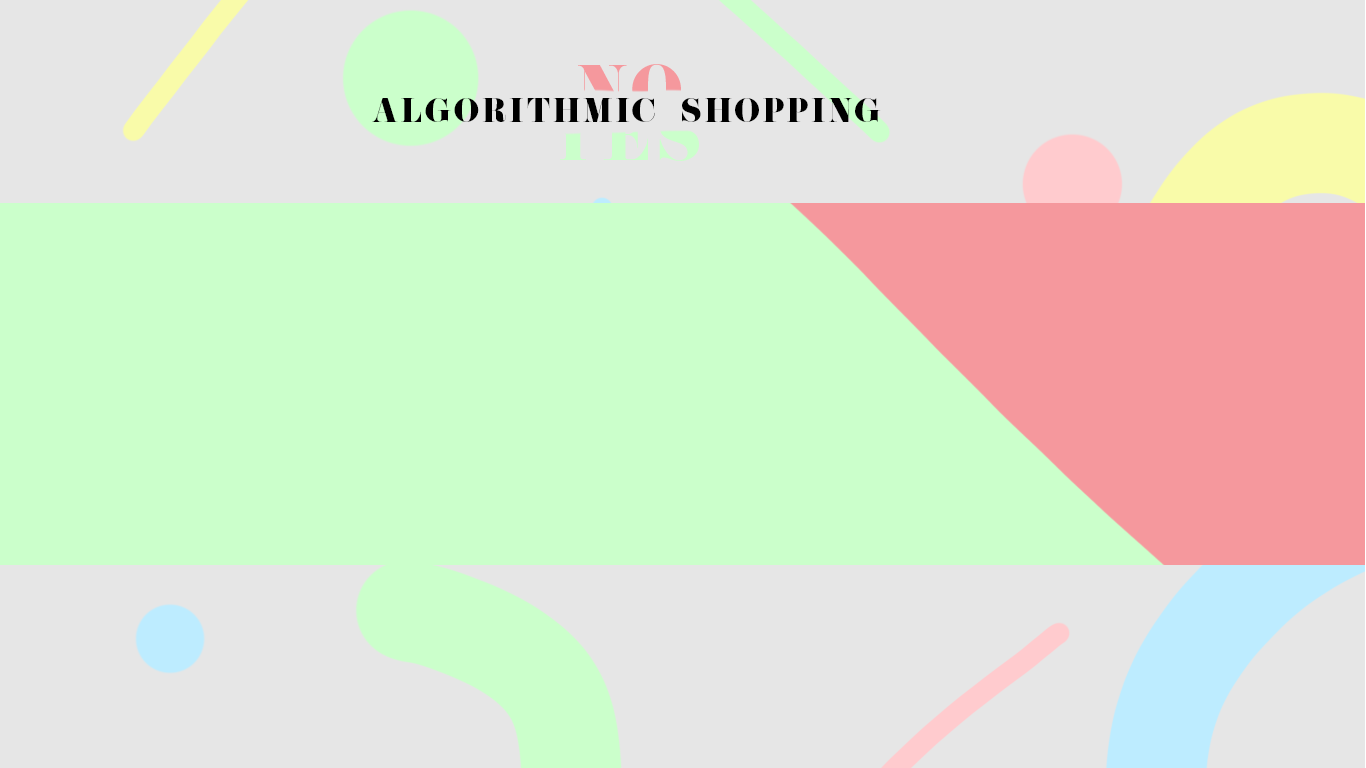
<style>
.page{position:relative;width:1366px;height:768px;background:#e6e6e6}
.page>*{position:absolute;margin:0}
.t1{font:28.7px "EloquentJFPro-Regular";letter-spacing:0.1em;color:#000000}
</style>
<div class="page">
<p class="t1" style="left:372px;top:98px;width:509px;height:24px">ALGORITHMIC  SHOPPING</p>
</div>
